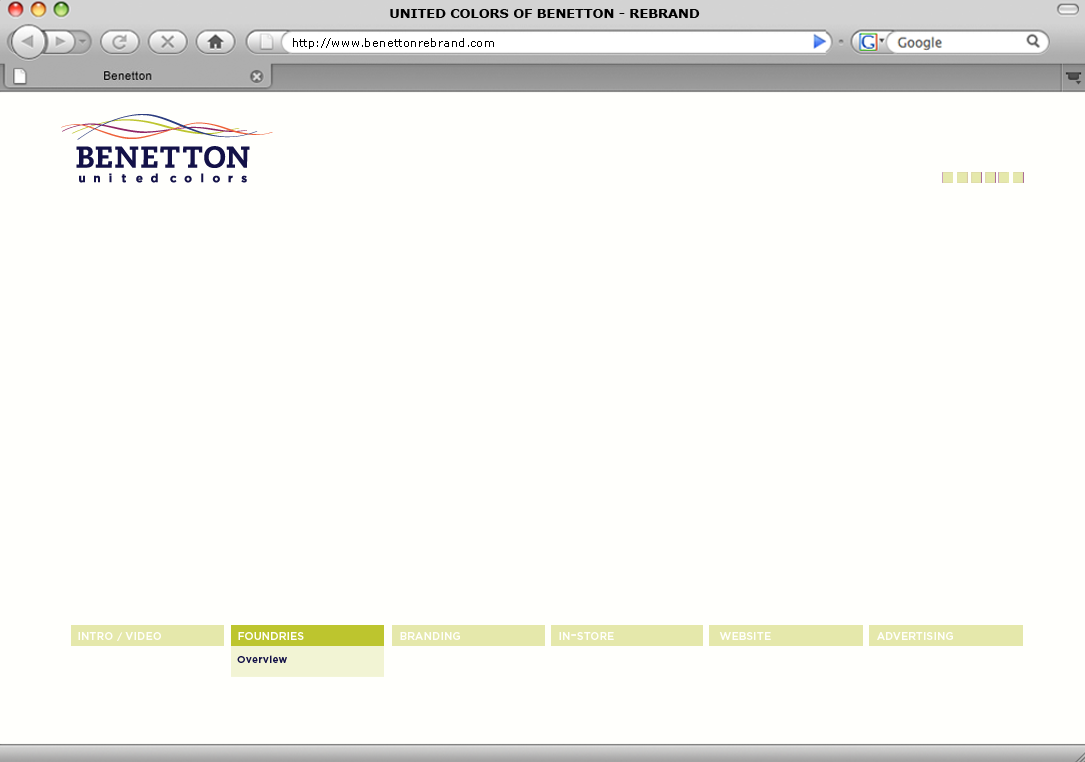
<style>
.page{position:relative;width:1085px;height:762px;background:#fffffc}
.page>*{position:absolute;margin:0}
.t1{font:12.9px "Verdana-Bold";color:#000000}
.t2{font:11.4px "Verdana";color:#000000}
.t3{font:15px "Gotham-Medium";letter-spacing:0.02em;color:#fffffb;font-variant:small-caps}
.t4{font:9px "Gotham-Medium";letter-spacing:0.02em;color:#fffffb;font-variant:small-caps}
.t5{font:10px "Gotham-Medium";letter-spacing:0.04em;color:#131148}
</style>
<div class="page">
<p class="t1" style="left:390px;top:9px;width:310px;height:9px">UNITED COLORS OF BENETTON - REBRAND</p>
<p class="t2" style="left:293px;top:38px;width:201px;height:11px">http://www.benettonrebrand.com</p>
<p class="t3" style="left:78px;top:632px;width:83px;height:9px">intro <span class="t4">/ </span>video</p>
<p class="t3" style="left:238px;top:632px;width:66px;height:8px">foundries</p>
<p class="t3" style="left:400px;top:632px;width:60px;height:8px">branding</p>
<p class="t3" style="left:559px;top:632px;width:55px;height:8px">in-store</p>
<p class="t3" style="left:719px;top:632px;width:52px;height:8px">website</p>
<p class="t3" style="left:877px;top:632px;width:76px;height:8px">advertising</p>
<p class="t5" style="left:237px;top:655px;width:50px;height:8px">Overview</p>
</div>
